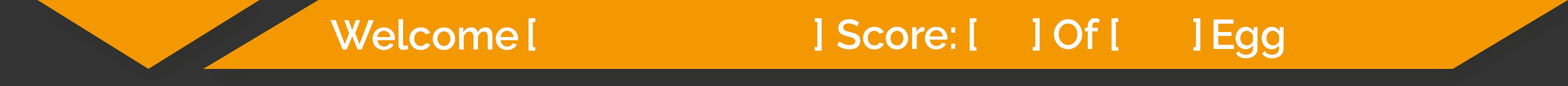
<style>
.page{position:relative;width:1568px;height:86px;background:#f39800}
.page>*{position:absolute;margin:0}
.t1{font:41.4px "Raleway-SemiBold";color:#ffffff}
</style>
<div class="page">
<p class="t1" style="left:330px;top:19px;width:188px;height:31px">Welcome</p>
<p class="t1" style="left:529px;top:18px;width:6px;height:33px">[</p>
<p class="t1" style="left:815px;top:18px;width:7px;height:33px">]</p>
<p class="t1" style="left:837px;top:19px;width:118px;height:30px">Score:</p>
<p class="t1" style="left:970px;top:18px;width:6px;height:33px">[</p>
<p class="t1" style="left:1033px;top:18px;width:7px;height:33px">]</p>
<p class="t1" style="left:1054px;top:18px;width:230px;height:40px">Of           Egg</p>
<p class="t1" style="left:1112px;top:18px;width:6px;height:33px">[</p>
<p class="t1" style="left:1193px;top:18px;width:8px;height:33px">]</p>
</div>
